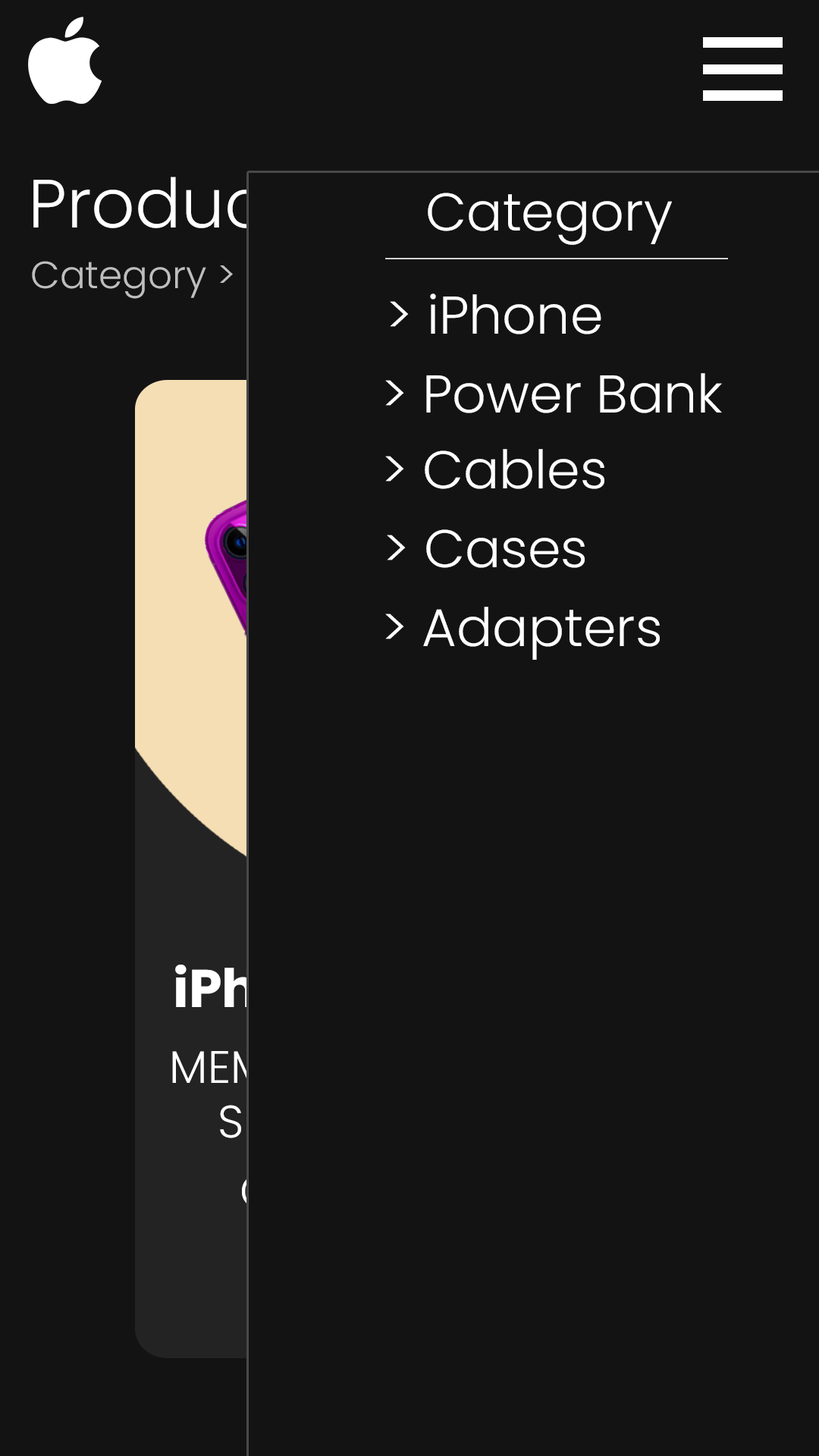
<style>
.page{position:relative;width:819px;height:1456px;background:#131313}
.page>*{position:absolute;margin:0}
.t1{font:68.2px "Poppins-Light";color:#ffffff}
.t2{font:53.1px "Poppins-Light";color:#ffffff}
.t3{font:37.9px "Poppins-Light"}
.t4{font:45.5px "Poppins-Light"}
</style>
<div class="page">
<p class="t1" style="left:33px;top:177px;width:289px;height:51px">Products</p>
<p class="t2" style="left:428px;top:193px;width:244px;height:52px">Category</p>
<p class="t3" style="left:32px;top:260px;width:343px;height:39px">Category &gt; Iphone</p>
<p class="t2" style="left:390px;top:293px;width:211px;height:41px">&gt; iPhone</p>
<p class="t2" style="left:385px;top:373px;width:337px;height:40px">&gt; Power Bank</p>
<p class="t2" style="left:385px;top:449px;width:219px;height:40px">&gt; Cables</p>
<p class="t2" style="left:387px;top:529px;width:198px;height:39px">&gt; Cases</p>
<p class="t2" style="left:385px;top:607px;width:275px;height:53px">&gt; Adapters</p>
<p class="t4" style="left:172px;top:1050px;width:184px;height:88px;text-align:center">MEMORY<br>SIZE:</p>
</div>
